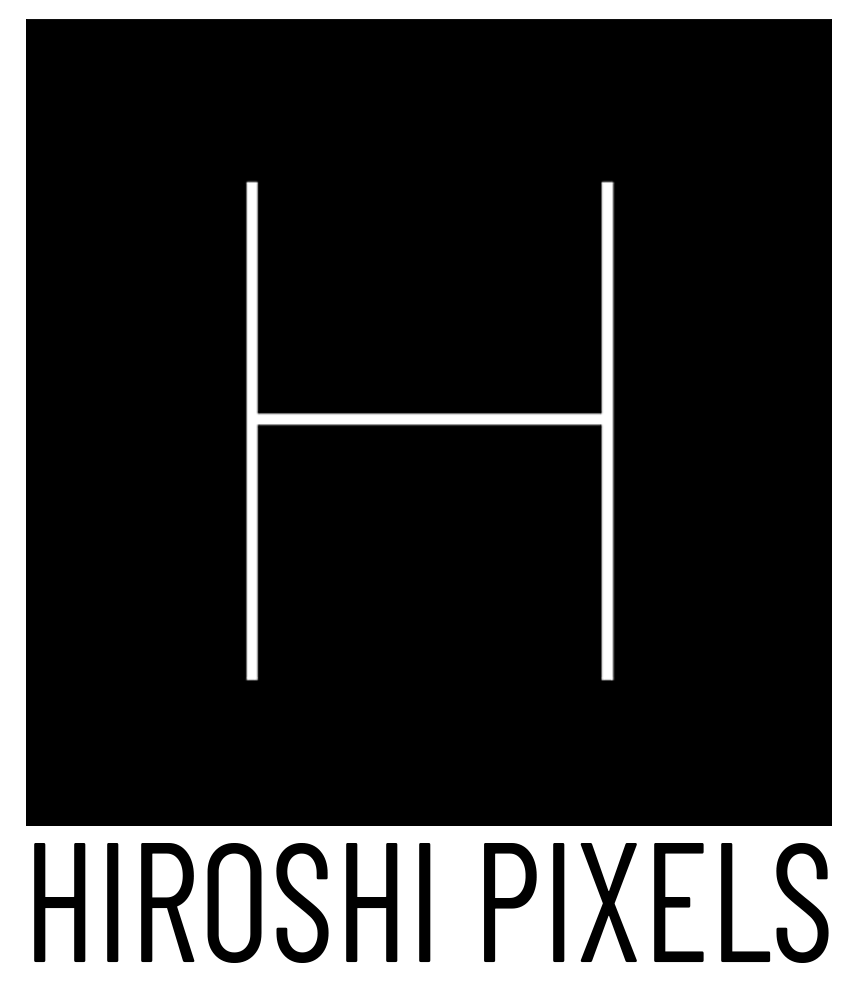
<style>
.page{position:relative;width:852px;height:996px;background:#000000}
.page>*{position:absolute;margin:0}
.t1{font:170.1px "BarlowCondensed-Regular";color:#000000;text-transform:uppercase;scale:0.92 1}
</style>
<div class="page">
<p class="t1" style="left:34px;top:843px;width:795px;height:120px">Hiroshi Pixels</p>
</div>
